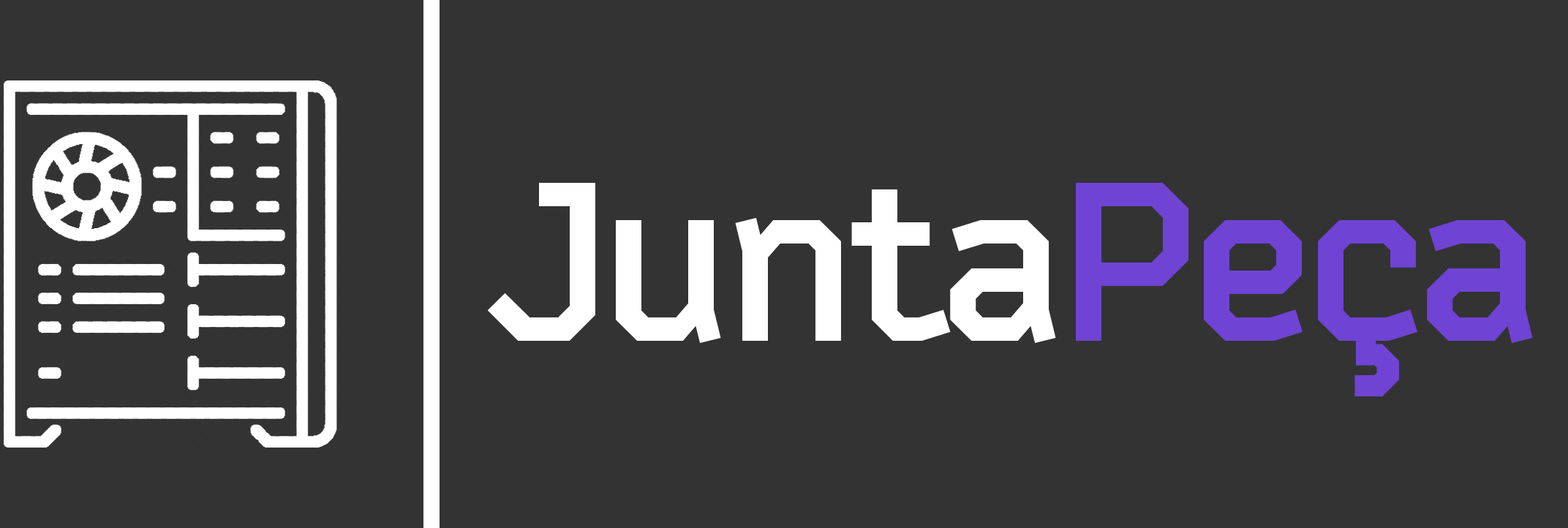
<style>
.page{position:relative;width:1568px;height:528px;background:#333333}
.page>*{position:absolute;margin:0}
.t1{font:222.5px "Bender-Bold";letter-spacing:-0.025em;color:#ffffff}
.t2{font:222.5px "Bender-Bold";letter-spacing:-0.025em;color:#6f43d3}
</style>
<div class="page">
<p class="t1" style="left:488px;top:183px;width:1045px;height:213px">Junta<span class="t2">Peça</span></p>
</div>
